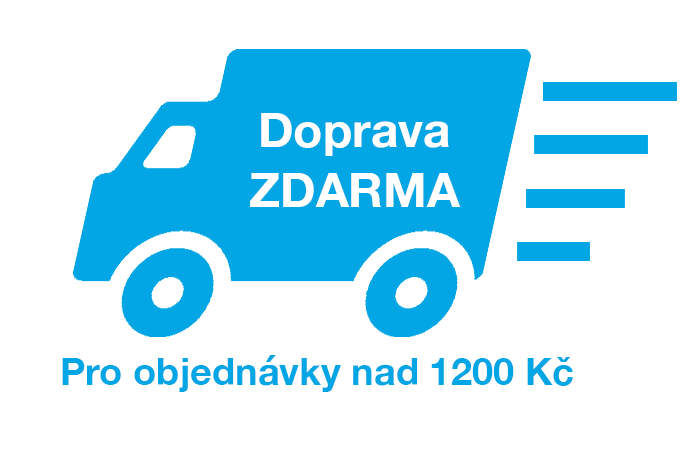
<style>
.page{position:relative;width:700px;height:450px;background:#ffffff}
.page>*{position:absolute;margin:0}
.t1{font:48px/60px "HelveticaNeue-Bold";color:#ffffff}
.t2{font:38px "HelveticaNeue-Bold";color:#03a6e4}
</style>
<div class="page">
<p class="t1" style="left:250px;top:113px;width:211px;height:94px;text-align:center">Doprava<br>ZDARMA</p>
<p class="t2" style="left:62px;top:355px;width:511px;height:37px">Pro objednávky nad 1200 Kč</p>
</div>
